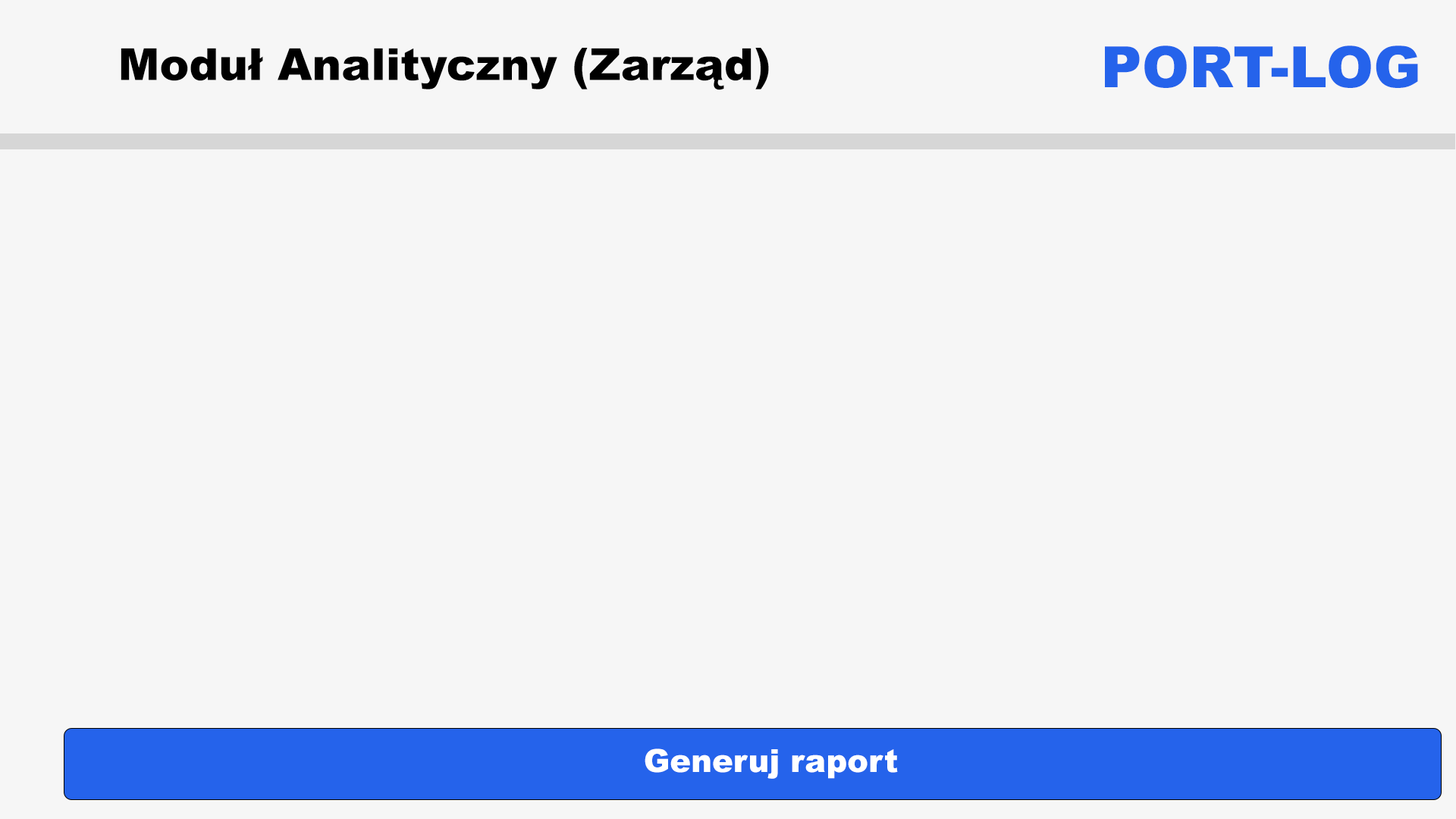
<style>
.page{position:relative;width:1456px;height:819px;background:#f6f6f6}
.page>*{position:absolute;margin:0}
.t1{font:44.2px "Arial-Black";color:#000000}
.t2{font:56.9px "Arial-Black";color:#2563eb}
.t3{font:31.6px "Arial-Black";color:#ffffff}
</style>
<div class="page">
<p class="t1" style="left:121px;top:48px;width:648px;height:42px">Moduł Analityczny (Zarząd)</p>
<p class="t2" style="left:1105px;top:45px;width:313px;height:43px">PORT-LOG</p>
<p class="t3" style="left:645px;top:748px;width:253px;height:31px">Generuj raport</p>
</div>
